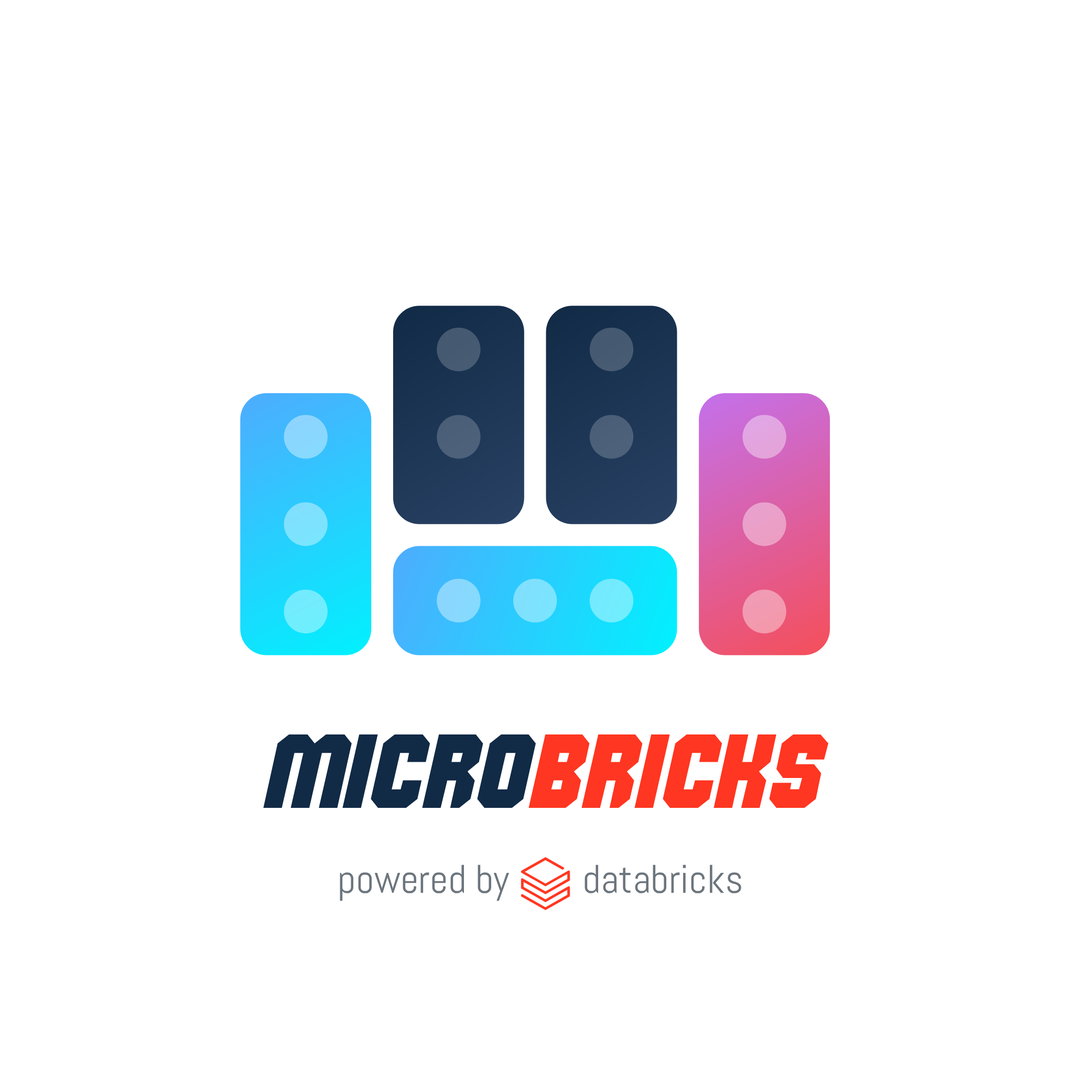
<style>
.page{position:relative;width:1092px;height:1092px;background:#ffffff}
.page>*{position:absolute;margin:0}
.t1{font:104.8px "Commando";color:#ff3621}
.t2{font:104.8px "Commando";color:#112a46}
.t3{font:39.9px "Abel-Regular";color:#6c757d}
</style>
<div class="page">
<p class="t1" style="left:263px;top:734px;width:565px;height:74px"><span class="t2">micro</span>Bricks</p>
<p class="t3" style="left:340px;top:864px;width:401px;height:37px">powered by        databricks</p>
</div>
